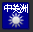
<style>
.page{position:relative;width:33px;height:32px;background:#000090}
.page>*{position:absolute;margin:0}
.t1{font:10.4px "SimSun";letter-spacing:-0.25em;color:#ffffff}
</style>
<div class="page">
<p class="t1" style="left:4px;top:4px;width:24px;height:9px">中美洲</p>
</div>
